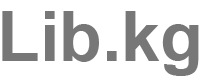
<style>
.page{position:relative;width:200px;height:80px;background:#ffffff}
.page>*{position:absolute;margin:0}
.t1{font:70.1px "Arial-BoldMT";color:#777777}
</style>
<div class="page">
<p class="t1" style="left:2px;top:11px;width:197px;height:65px">Lib.kg</p>
</div>
